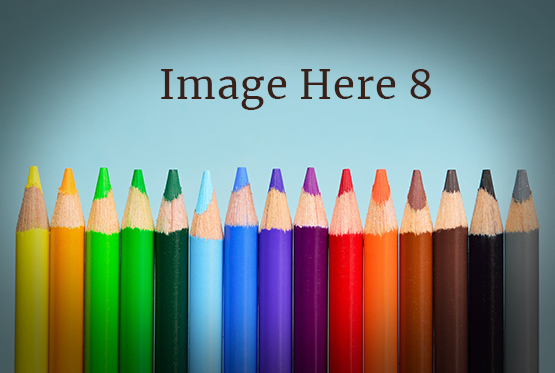
<style>
.page{position:relative;width:555px;height:373px}
.page>*{position:absolute;margin:0}
.t1{font:40px "Merriweather-Regular";letter-spacing:0.025em;color:#392019}
</style>
<div class="page">
<p class="t1" style="left:161px;top:69px;width:270px;height:41px">Image Here 8</p>
</div>
